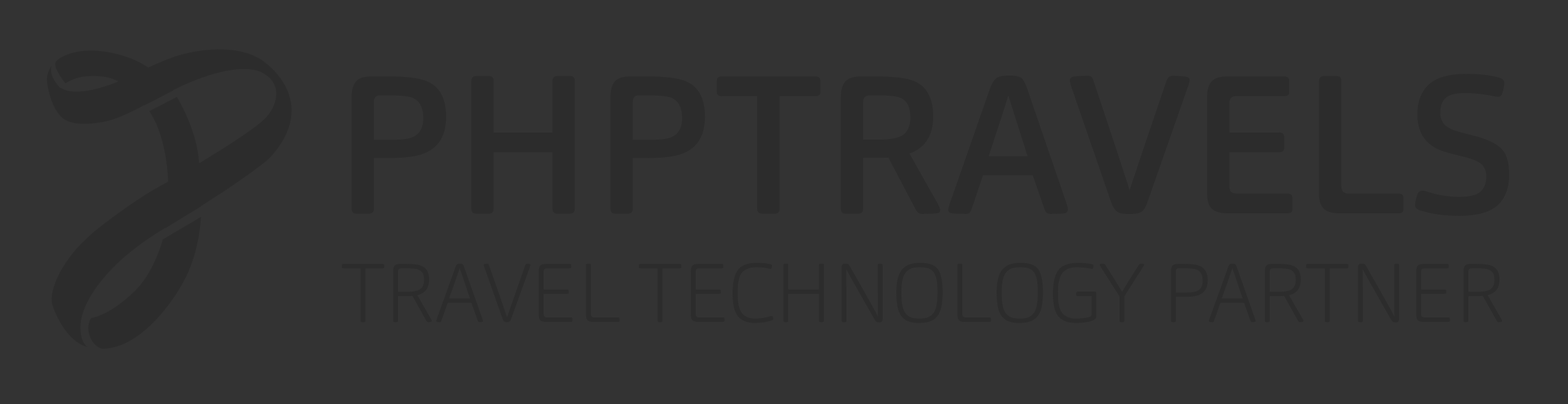
<style>
.page{position:relative;width:1568px;height:404px;background:#333333}
.page>*{position:absolute;margin:0}
.t1{font:194.1px "Carnas-Medium";color:#2c2c2c}
.t2{font:82.2px "Carnas-ExtraLight";color:#2c2c2c}
</style>
<div class="page">
<p class="t1" style="left:351px;top:74px;width:1159px;height:142px">PHPTRAVELS</p>
<p class="t2" style="left:342px;top:263px;width:1161px;height:61px">TRAVEL TECHNOLOGY PARTNER</p>
</div>
